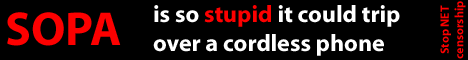
<style>
.page{position:relative;width:468px;height:60px;background:#000000}
.page>*{position:absolute;margin:0}
.t1{font:24px "Myriad-Bold";color:#ffffff}
.t2{font:24px "Myriad-Bold";color:#fd0000}
.t3{font:12px "Myriad-Bold";color:#fd0000}
.t4{font:48px "Myriad-Bold";color:#fd0000}
</style>
<div class="page">
<p class="t1" style="left:153px;top:5px;width:247px;height:51px">is so <span class="t2">stupid</span> it could trip <br>over a cordless phone</p>
<p class="t3" style="left:440px;top:1px;width:26px;height:58px;rotate:-90deg">Stop NET censorship</p>
<p class="t4" style="left:7px;top:12px;width:114px;height:34px">SOPA</p>
</div>
